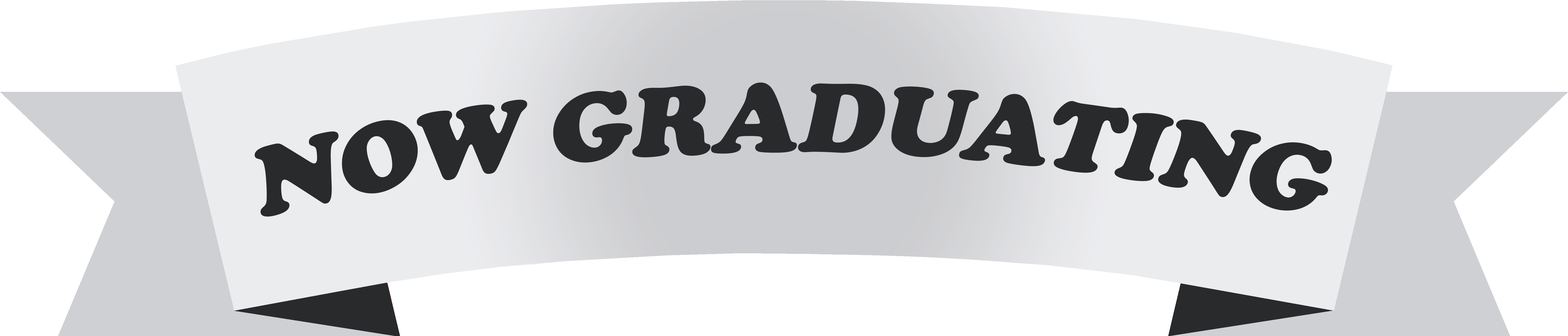
<style>
.page{position:relative;width:1568px;height:336px;background:#ffffff}
.page>*{position:absolute;margin:0}
.t1{font:101.3px "CooperBlack";color:#292a2c;font-style:italic}
</style>
<div class="page">
<p class="t1" style="left:255px;top:82px;width:1077px;height:134px">NOW GRADUATING</p>
</div>
